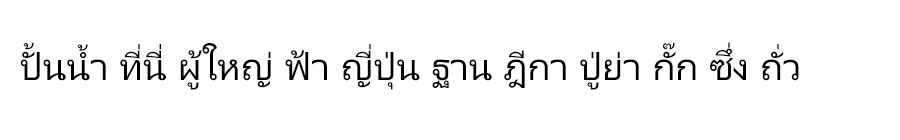
<style>
.page{position:relative;width:900px;height:140px;background:#ffffff}
.page>*{position:absolute;margin:0}
.t1{font:40px "LeelawadeeUI";color:#000000}
</style>
<div class="page">
<p class="t1" style="left:20px;top:42px;width:779px;height:48px">ปั้นน้ำ ที่นี่ ผู้ใหญ่ ฟ้า ญี่ปุ่น ฐาน ฎีกา ปู่ย่า กั๊ก ซึ่ง ถั่ว</p>
</div>
